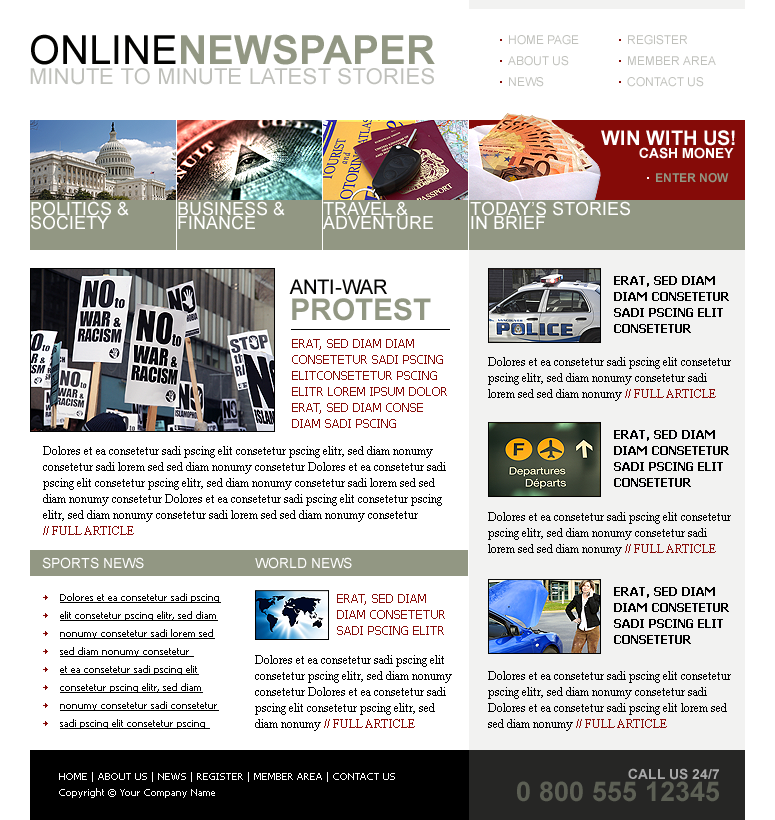
<style>
.page{position:relative;width:775px;height:820px;background:#ffffff}
.page>*{position:absolute;margin:0}
.t1{font:40px "Arial-BoldMT";color:#929783;text-transform:uppercase}
.t2{font:40px "ArialMT";color:#030301;text-transform:uppercase}
.t3{font:12px "ArialMT";color:#bfc0bb;text-transform:uppercase}
.t4{font:22px "ArialMT";letter-spacing:0.01em;color:#bfc0bb;text-transform:uppercase}
.t5{font:20px "Arial-BoldMT";color:#ffffff;text-transform:uppercase}
.t6{font:14px "Arial-BoldMT";color:#ffffff;text-transform:uppercase}
.t7{font:12px "Arial-BoldMT";color:#929783;text-transform:uppercase}
.t8{font:18px/14px "ArialMT";color:#ffffff;text-transform:uppercase}
.t9{font:20px/26px "ArialMT";color:#030301;text-transform:uppercase}
.t10{font:30px/26px "Arial-BoldMT";color:#929783;text-transform:uppercase}
.t11{font:12px/16px "Tahoma-Bold";color:#000000}
.t12{font:12px/16px "Tahoma";color:#850b08}
.t13{font:12px/16px "TimesNewRomanPSMT";color:#000000}
.t14{font:12px/16px "TimesNewRomanPSMT";color:#850b08}
.t15{font:14px "ArialMT";color:#ffffff;text-transform:uppercase}
.t16{font:10px/18px "Tahoma";color:#000000;text-decoration:underline}
.t17{font:10px/16px "Tahoma";color:#ffffff}
.t18{font:14px "Arial-BoldMT";color:#a8a8a8;text-transform:uppercase}
.t19{font:27px "Arial-BoldMT";color:#5c5f54;text-transform:uppercase}
</style>
<div class="page">
<p class="t1" style="left:31px;top:34px;width:404px;height:31px"><span class="t2">ONLINE</span>NEWSPAPER</p>
<p class="t3" style="left:509px;top:35px;width:70px;height:10px">HOME PAGE</p>
<p class="t3" style="left:628px;top:35px;width:59px;height:10px">REGISTER</p>
<p class="t3" style="left:508px;top:56px;width:61px;height:10px">ABOUT US</p>
<p class="t3" style="left:628px;top:56px;width:88px;height:9px">MEMBER AREA</p>
<p class="t4" style="left:30px;top:68px;width:404px;height:17px">MINUTE TO MINUTE LATEST STORIES</p>
<p class="t3" style="left:509px;top:77px;width:35px;height:10px">NEWS</p>
<p class="t3" style="left:627px;top:77px;width:77px;height:10px">CONTACT US</p>
<p class="t5" style="left:601px;top:130px;width:134px;height:16px">win with us!</p>
<p class="t6" style="left:639px;top:147px;width:95px;height:12px">cash money</p>
<p class="t7" style="left:656px;top:173px;width:73px;height:10px">ENTER NOW</p>
<p class="t8" style="left:31px;top:201px;width:98px;height:29px">POLITICS &amp;<br>SOCIETY</p>
<p class="t8" style="left:178px;top:201px;width:107px;height:29px">BUSINESS &amp;<br>FINANCE</p>
<p class="t8" style="left:323px;top:201px;width:110px;height:29px">TRAVEL &amp;<br>ADVENTURE</p>
<p class="t8" style="left:470px;top:201px;width:160px;height:28px">TODAY’S STORIES<br>IN BRIEF</p>
<p class="t9" style="left:289px;top:279px;width:142px;height:42px">anti-WAR<br><span class="t10">PROTEST</span></p>
<p class="t11" style="left:614px;top:276px;width:115px;height:57px">ERAT, SED DIAM DIAM CONSETETUR SADI PSCING ELIT CONSETETUR</p>
<p class="t12" style="left:292px;top:339px;width:155px;height:89px">ERAT, SED DIAM DIAM CONSETETUR SADI PSCING ELITCONSETETUR PSCING ELITR LOREM IPSUM DOLOR<br>ERAT, SED DIAM CONSE DIAM SADI PSCING</p>
<p class="t13" style="left:488px;top:357px;width:243px;height:44px">Dolores et ea consetetur sadi pscing elit consetetur pscing elitr, sed diam nonumy consetetur sadi lorem sed sed diam nonumy <span class="t14">// FULL ARTICLE</span></p>
<p class="t11" style="left:614px;top:430px;width:115px;height:57px">ERAT, SED DIAM DIAM CONSETETUR SADI PSCING ELIT CONSETETUR</p>
<p class="t13" style="left:43px;top:446px;width:403px;height:89px">Dolores et ea consetetur sadi pscing elit consetetur pscing elitr, sed diam nonumy consetetur sadi lorem sed sed diam nonumy consetetur Dolores et ea consetetur sadi pscing elit consetetur pscing elitr, sed diam nonumy consetetur sadi lorem sed sed diam nonumy consetetur Dolores et ea consetetur sadi pscing elit consetetur pscing elitr, sed diam nonumy consetetur sadi lorem sed sed diam nonumy consetetur <br><span class="t14">// FULL ARTICLE</span></p>
<p class="t13" style="left:488px;top:512px;width:243px;height:44px">Dolores et ea consetetur sadi pscing elit consetetur pscing elitr, sed diam nonumy consetetur sadi lorem sed sed diam nonumy <span class="t14">// FULL ARTICLE</span></p>
<p class="t15" style="left:42px;top:557px;width:102px;height:12px">SPORTS NEWS</p>
<p class="t15" style="left:255px;top:557px;width:97px;height:12px">WORLD NEWS</p>
<p class="t16" style="left:60px;top:593px;width:161px;height:136px">Dolores et ea consetetur sadi pscing elit consetetur pscing elitr, sed diam nonumy consetetur sadi lorem sed sed diam nonumy consetetur <br>et ea consetetur sadi pscing elit consetetur pscing elitr, sed diam nonumy consetetur sadi consetetur sadi pscing elit consetetur pscing</p>
<p class="t11" style="left:614px;top:587px;width:115px;height:57px">ERAT, SED DIAM DIAM CONSETETUR SADI PSCING ELIT CONSETETUR</p>
<p class="t12" style="left:337px;top:594px;width:108px;height:41px">ERAT, SED DIAM DIAM CONSETETUR SADI PSCING ELITR</p>
<p class="t13" style="left:255px;top:655px;width:197px;height:76px">Dolores et ea consetetur sadi pscing elit consetetur pscing elitr, sed diam nonumy consetetur Dolores et ea consetetur sadi pscing elit consetetur pscing elitr, sed diam nonumy <span class="t14">// FULL ARTICLE</span></p>
<p class="t13" style="left:488px;top:671px;width:243px;height:60px">Dolores et ea consetetur sadi pscing elit consetetur pscing elitr, sed diam nonumy consetetur sadi Dolores et ea consetetur sadi pscing elit lorem sed sed diam nonumy <span class="t14">// FULL ARTICLE</span></p>
<p class="t17" style="left:59px;top:772px;width:336px;height:26px">HOME | ABOUT US | NEWS | REGISTER | MEMBER AREA | CONTACT US<br>Copyright © Your Company Name</p>
<p class="t18" style="left:628px;top:768px;width:91px;height:12px">CALL US 24/7</p>
<p class="t19" style="left:517px;top:781px;width:202px;height:21px">0 800 555 12345</p>
</div>
